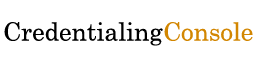
<style>
.page{position:relative;width:260px;height:77px;background:#ffffff}
.page>*{position:absolute;margin:0}
.t1{font:25px "Century";color:#000000}
.t2{font:25px "Century";color:#d28601}
</style>
<div class="page">
<p class="t1" style="left:4px;top:22px;width:159px;height:24px">Credentialing</p>
<p class="t2" style="left:164px;top:22px;width:89px;height:19px">Console</p>
</div>
